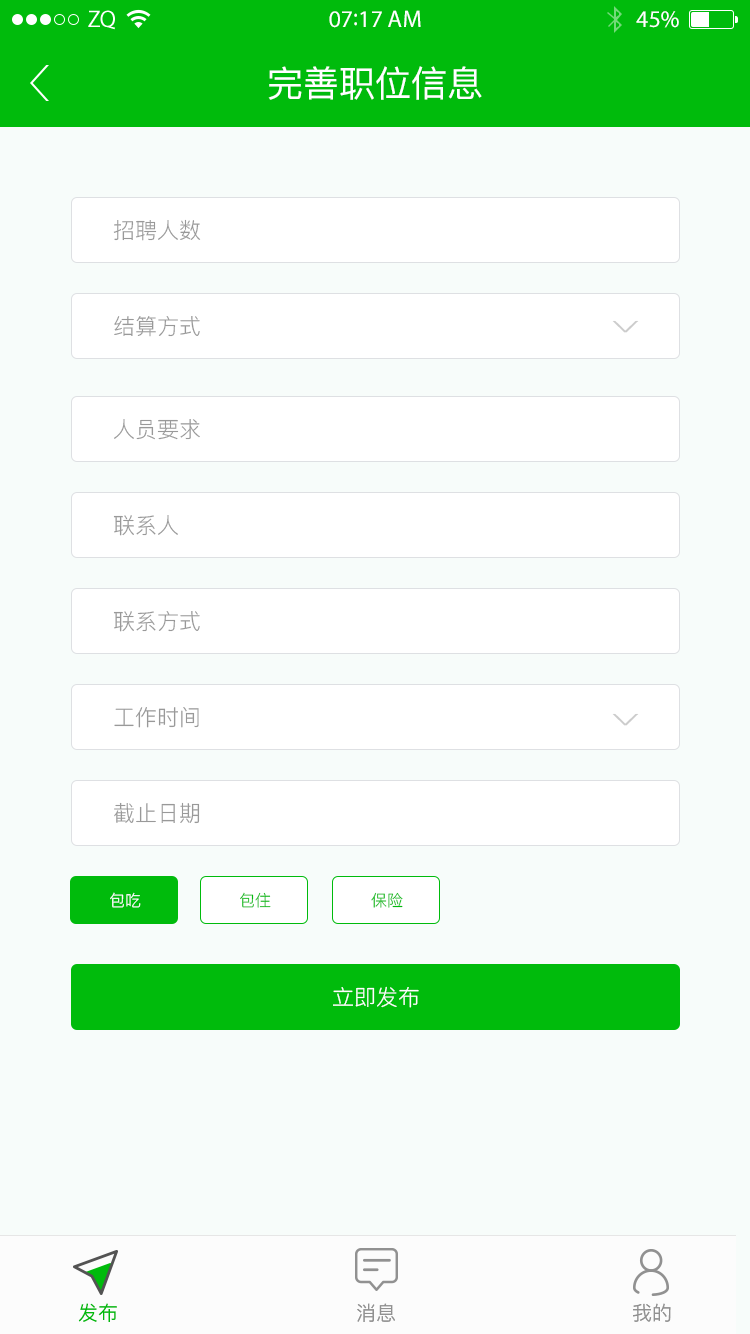
<style>
.page{position:relative;width:750px;height:1334px;background:#f7fcfa}
.page>*{position:absolute;margin:0}
.t1{font:24px "MyriadPro-Regular";color:#ffffff}
.t2{font:36px "PingFang-SC-Medium";color:#ffffff}
.t3{font:22px "PingFang-SC-Regular";color:#999999}
.t4{font:50px "PingFang-SC-Regular";color:#cccccc;scale:0.44 1}
.t5{font:16px "PingFang-SC-Regular";color:#ffffff}
.t6{font:16px "PingFang-SC-Regular";color:#00bb0c}
.t7{font:22px "PingFang-SC-Regular";color:#ffffff}
.t8{font:20px "PingFang-SC-Medium";color:#00bb0c}
.t9{font:20px "PingFang-SC-Medium";color:#919191}
</style>
<div class="page">
<p class="t1" style="left:329px;top:10px;width:92px;height:18px">07:17 AM</p>
<p class="t1" style="left:636px;top:11px;width:43px;height:17px">45%</p>
<p class="t2" style="left:268px;top:66px;width:214px;height:34px">完善职位信息</p>
<p class="t3" style="left:113px;top:219px;width:88px;height:22px">招聘人数</p>
<p class="t3" style="left:114px;top:316px;width:86px;height:21px">结算方式</p>
<p class="t4" style="left:612px;top:320px;width:27px;height:13px;rotate:90deg">&gt;</p>
<p class="t3" style="left:114px;top:419px;width:86px;height:21px">人员要求</p>
<p class="t3" style="left:113px;top:515px;width:65px;height:21px">联系人</p>
<p class="t3" style="left:113px;top:611px;width:87px;height:21px">联系方式</p>
<p class="t3" style="left:114px;top:707px;width:85px;height:21px">工作时间</p>
<p class="t4" style="left:612px;top:713px;width:27px;height:13px;rotate:90deg">&gt;</p>
<p class="t3" style="left:114px;top:802px;width:86px;height:22px">截止日期</p>
<p class="t5" style="left:110px;top:892px;width:31px;height:16px">包吃</p>
<p class="t6" style="left:240px;top:892px;width:31px;height:16px">包住</p>
<p class="t6" style="left:371px;top:892px;width:32px;height:16px">保险</p>
<p class="t7" style="left:333px;top:986px;width:86px;height:22px">立即发布</p>
<p class="t8" style="left:78px;top:1303px;width:39px;height:19px">发布</p>
<p class="t9" style="left:357px;top:1303px;width:38px;height:19px">消息</p>
<p class="t9" style="left:633px;top:1303px;width:38px;height:19px">我的</p>
</div>
